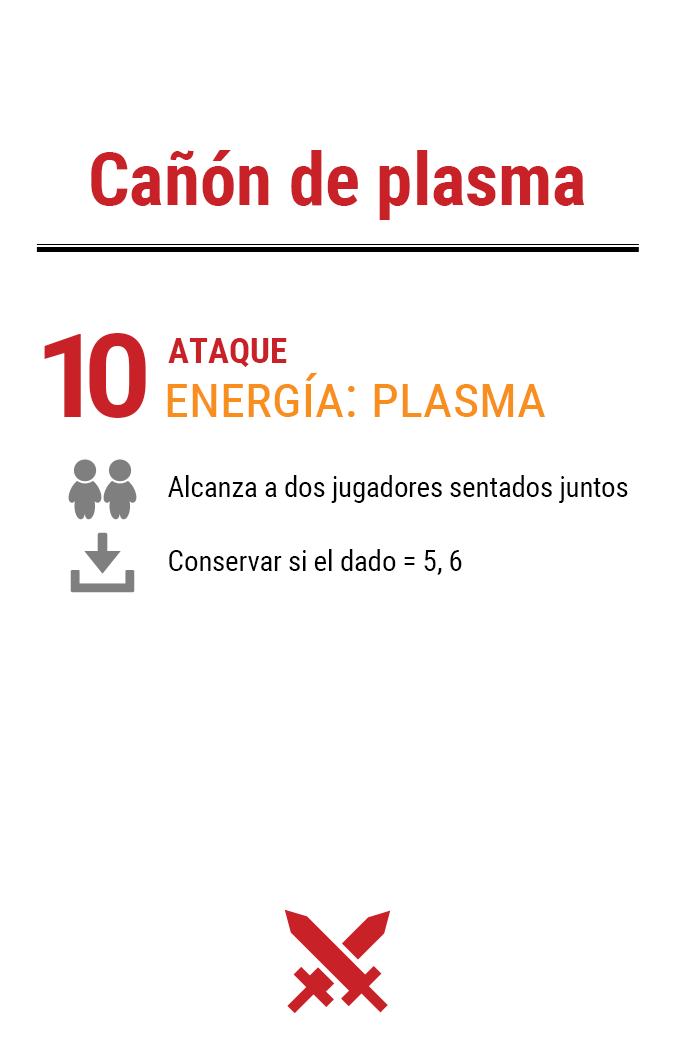
<style>
.page{position:relative;width:675px;height:1050px;background:#ffffff}
.page>*{position:absolute;margin:0}
.t1{font:72.9px "RobotoCondensed-Bold";color:#c82127}
.t2{font:116.7px "Roboto-Bold";letter-spacing:-0.16em;color:#c82127}
.t3{font:35px "RobotoCondensed-Bold";color:#c82127}
.t4{font:58.3px "RobotoCondensed-Regular";color:#f78e1e;font-variant:small-caps}
.t5{font:29.2px "RobotoCondensed-Regular";letter-spacing:-0.01em;color:#000000}
</style>
<div class="page">
<p class="t1" style="left:91px;top:150px;width:494px;height:70px">Cañón de plasma</p>
<p class="t2" style="left:44px;top:333px;width:102px;height:85px">10</p>
<p class="t3" style="left:168px;top:338px;width:119px;height:29px">ATAQUE</p>
<p class="t4" style="left:167px;top:373px;width:379px;height:44px">energía: plasma</p>
<p class="t5" style="left:168px;top:475px;width:460px;height:28px">Alcanza a dos jugadores sentados juntos</p>
<p class="t5" style="left:169px;top:549px;width:293px;height:26px">Conservar si el dado = 5, 6</p>
</div>
